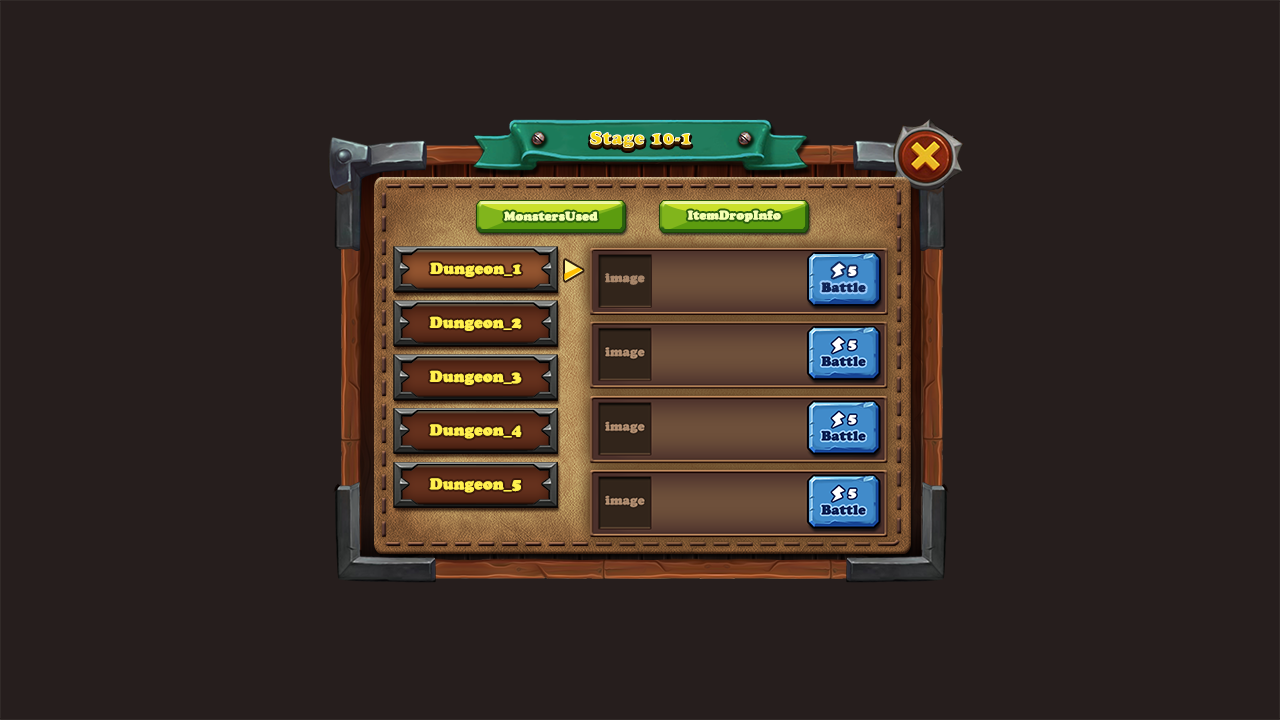
<style>
.page{position:relative;width:1280px;height:720px;background:#261e1d}
.page>*{position:absolute;margin:0}
.t1{font:18px "CooperBlackStd";font-weight:bold}
.t2{font:12px "CooperBlackStd";color:#f5ffb1;font-weight:bold}
.t3{font:15px "CooperBlackStd";color:#fff04e;font-weight:bold}
.t4{font:13px "CooperBlackStd";color:#ffffff;font-weight:bold}
.t5{font:12px "CooperBlackStd";color:#a8866a;font-weight:bold}
.t6{font:13px "CooperBlackStd";color:#0f2457;font-weight:bold}
</style>
<div class="page">
<p class="t1" style="left:589px;top:133px;width:103px;height:18px">Stage 10-1</p>
<p class="t1" style="left:589px;top:130px;width:103px;height:18px">Stage 10-1</p>
<p class="t2" style="left:504px;top:211px;width:94px;height:10px">MonstersUsed</p>
<p class="t2" style="left:687px;top:210px;width:94px;height:12px">ItemDropInfo</p>
<p class="t3" style="left:430px;top:262px;width:92px;height:15px">Dungeon_1</p>
<p class="t4" style="left:848px;top:266px;width:9px;height:10px">5</p>
<p class="t5" style="left:605px;top:273px;width:40px;height:12px">image</p>
<p class="t6" style="left:821px;top:282px;width:45px;height:11px">Battle</p>
<p class="t3" style="left:429px;top:316px;width:93px;height:15px">Dungeon_2</p>
<p class="t3" style="left:429px;top:370px;width:93px;height:15px">Dungeon_3</p>
<p class="t3" style="left:429px;top:424px;width:93px;height:15px">Dungeon_4</p>
<p class="t3" style="left:429px;top:478px;width:92px;height:15px">Dungeon_5</p>
</div>
